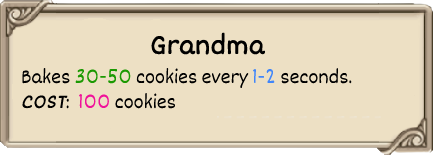
<style>
.page{position:relative;width:433px;height:155px;background:#ede0c4}
.page>*{position:absolute;margin:0}
.t1{font:30px "Dekko";color:#000000;font-weight:bold}
.t2{font:21px "Dekko";color:#000000}
.t3{font:21px "Dekko";color:#1b9902}
.t4{font:21px "Dekko";color:#4086fa}
.t5{font:21px "Dekko";color:#000000;font-weight:bold;font-style:italic}
.t6{font:21px "Dekko";color:#f0129a}
</style>
<div class="page">
<p class="t1" style="left:151px;top:32px;width:115px;height:23px">Grandma</p>
<p class="t2" style="left:22px;top:67px;width:330px;height:42px">Bakes <span class="t3">30-50 </span>cookies every <span class="t4">1-2 </span>seconds.<br><span class="t5">COST</span>:  <span class="t6">100 </span>cookies</p>
</div>
